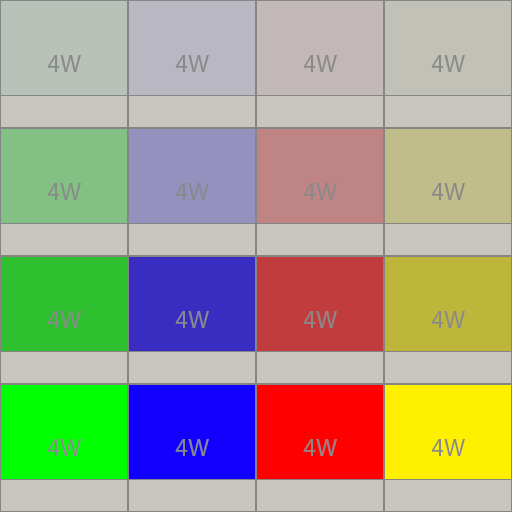
<style>
.page{position:relative;width:512px;height:512px;background:#c8c6bf}
.page>*{position:absolute;margin:0}
.t1{font:25px "MyriadPro-Regular";color:#898989}
</style>
<div class="page">
<p class="t1" style="left:47px;top:55px;width:34px;height:17px">4W</p>
<p class="t1" style="left:175px;top:55px;width:34px;height:17px">4W</p>
<p class="t1" style="left:303px;top:55px;width:34px;height:17px">4W</p>
<p class="t1" style="left:431px;top:55px;width:34px;height:17px">4W</p>
<p class="t1" style="left:47px;top:183px;width:34px;height:17px">4W</p>
<p class="t1" style="left:175px;top:183px;width:34px;height:17px">4W</p>
<p class="t1" style="left:303px;top:183px;width:34px;height:17px">4W</p>
<p class="t1" style="left:431px;top:183px;width:34px;height:17px">4W</p>
<p class="t1" style="left:47px;top:311px;width:34px;height:17px">4W</p>
<p class="t1" style="left:175px;top:311px;width:34px;height:17px">4W</p>
<p class="t1" style="left:303px;top:311px;width:34px;height:17px">4W</p>
<p class="t1" style="left:431px;top:311px;width:34px;height:17px">4W</p>
<p class="t1" style="left:47px;top:439px;width:34px;height:17px">4W</p>
<p class="t1" style="left:175px;top:439px;width:34px;height:17px">4W</p>
<p class="t1" style="left:303px;top:439px;width:34px;height:17px">4W</p>
<p class="t1" style="left:431px;top:439px;width:34px;height:17px">4W</p>
</div>
